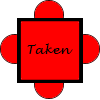
<style>
.page{position:relative;width:100px;height:100px;background:#ff0000}
.page>*{position:absolute;margin:0}
.t1{font:12.5px "LucidaHandwriting-Italic";color:#000000}
</style>
<div class="page">
<p class="t1" style="left:27px;top:43px;width:46px;height:11px">Taken</p>
</div>
